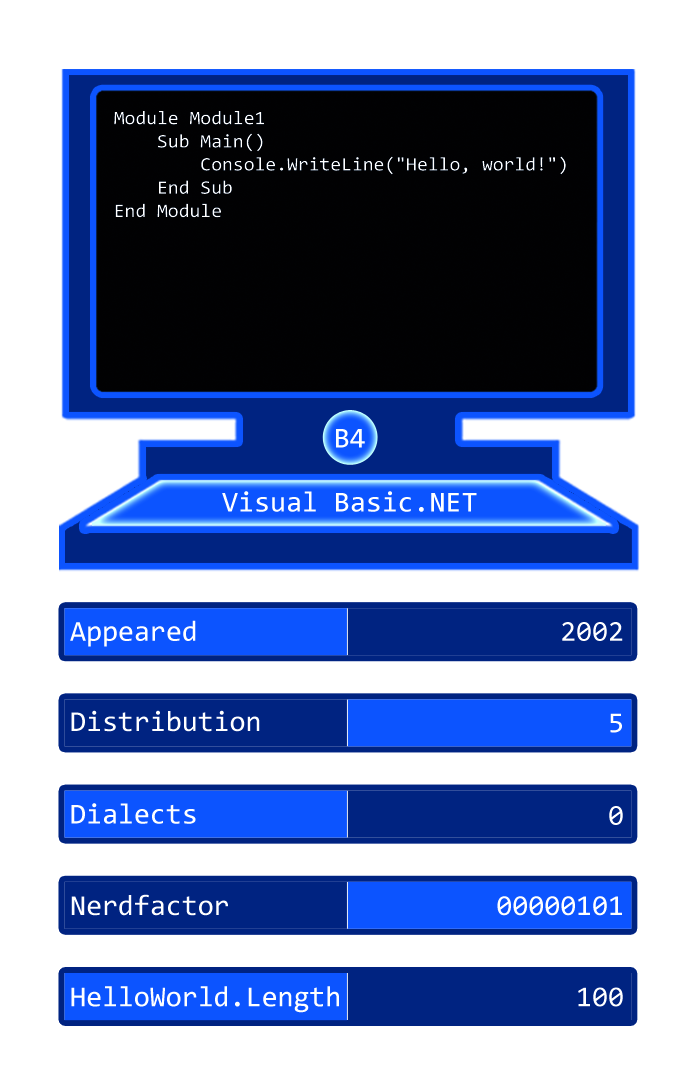
<style>
.page{position:relative;width:697px;height:1087px;background:#ffffff}
.page>*{position:absolute;margin:0}
.t1{font:19.3px "Consolas";color:#ffffff}
.t2{font:29px "Consolas";color:#ffffff}
</style>
<div class="page">
<p class="t1" style="left:114px;top:111px;width:452px;height:107px">Module Module1<br>    Sub Main() <br>        Console.WriteLine("Hello, world!")<br>    End Sub<br>End Module</p>
<p class="t2" style="left:336px;top:429px;width:29px;height:19px">B4</p>
<p class="t2" style="left:222px;top:491px;width:255px;height:21px">Visual Basic.NET</p>
<p class="t2" style="left:70px;top:620px;width:126px;height:27px">Appeared</p>
<p class="t2" style="left:562px;top:622px;width:61px;height:19px">2002</p>
<p class="t2" style="left:71px;top:710px;width:189px;height:22px">Distribution</p>
<p class="t2" style="left:610px;top:713px;width:12px;height:20px">5</p>
<p class="t2" style="left:71px;top:803px;width:125px;height:21px">Dialects</p>
<p class="t2" style="left:609px;top:806px;width:14px;height:19px">0</p>
<p class="t2" style="left:71px;top:894px;width:157px;height:22px">Nerdfactor</p>
<p class="t2" style="left:497px;top:896px;width:125px;height:20px">00000101</p>
<p class="t2" style="left:71px;top:986px;width:268px;height:27px">HelloWorld.Length</p>
<p class="t2" style="left:578px;top:987px;width:45px;height:20px">100</p>
</div>
